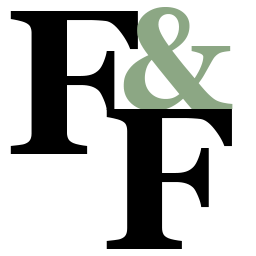
<style>
.page{position:relative;width:256px;height:256px;background:#ffffff}
.page>*{position:absolute;margin:0}
.t1{font:206.1px "Georgia-Bold";color:#000000}
.t2{font:142.7px "Georgia-Bold";color:#8ca784}
.t3{font:201.8px "Georgia-Bold";color:#000000}
</style>
<div class="page">
<p class="t1" style="left:10px;top:11px;width:128px;height:143px">F</p>
<p class="t2" style="left:123px;top:7px;width:110px;height:104px">&amp;</p>
<p class="t3" style="left:106px;top:109px;width:126px;height:140px">F</p>
</div>
